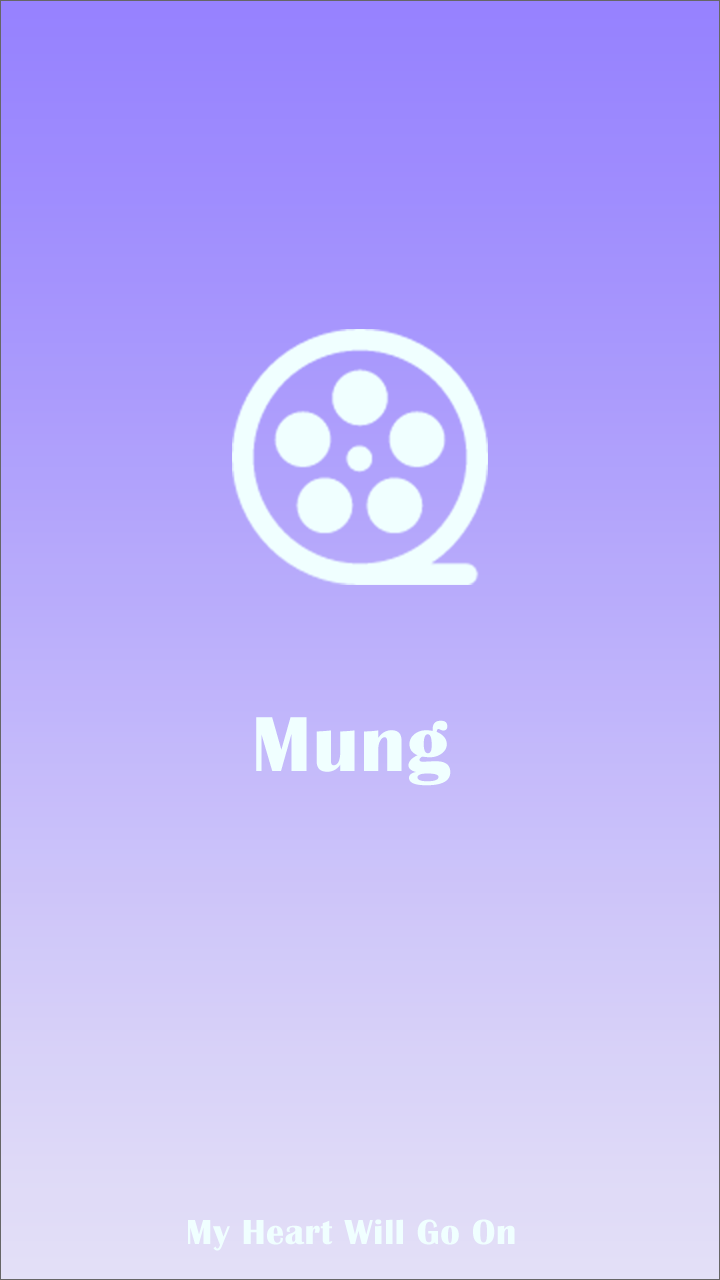
<style>
.page{position:relative;width:720px;height:1280px}
.page>*{position:absolute;margin:0}
.t1{font:80.4px "BritannicBold";letter-spacing:0.02em;color:#f0ffff}
.t2{font:36px "BritannicBold";letter-spacing:0.02em;color:#f0ffff}
</style>
<div class="page">
<p class="t1" style="left:256px;top:717px;width:195px;height:69px">Mung</p>
<p class="t2" style="left:188px;top:1219px;width:327px;height:32px">My Heart Will Go On</p>
</div>
